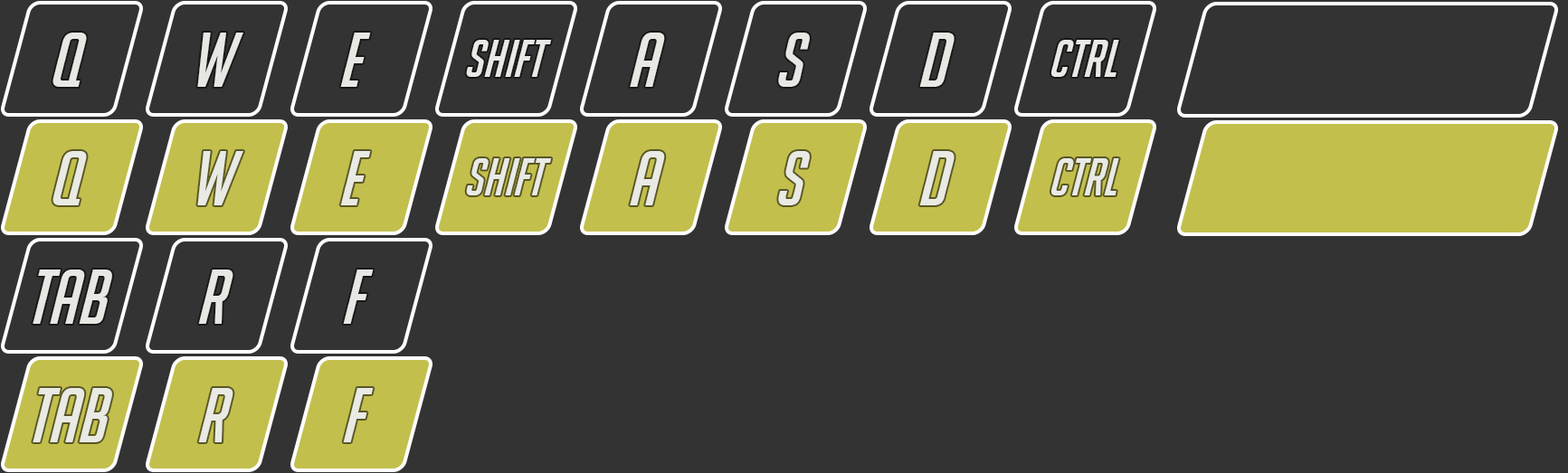
<style>
.page{position:relative;width:1568px;height:473px;background:#333333}
.page>*{position:absolute;margin:0}
.t1{font:74.8px "BigNoodleTooOblique";color:#e9eae5}
.t2{font:51.2px "BigNoodleTooOblique";color:#e9eae5}
</style>
<div class="page">
<p class="t1" style="left:52px;top:33px;width:35px;height:54px">Q</p>
<p class="t1" style="left:197px;top:33px;width:46px;height:54px">W</p>
<p class="t1" style="left:340px;top:33px;width:31px;height:54px">E</p>
<p class="t2" style="left:466px;top:40px;width:86px;height:37px">SHIFT</p>
<p class="t1" style="left:630px;top:33px;width:35px;height:54px">A</p>
<p class="t1" style="left:778px;top:33px;width:32px;height:54px">S</p>
<p class="t1" style="left:919px;top:33px;width:36px;height:54px">D</p>
<p class="t2" style="left:1050px;top:40px;width:69px;height:37px">CTRL</p>
<p class="t1" style="left:52px;top:151px;width:35px;height:54px">Q</p>
<p class="t1" style="left:197px;top:151px;width:46px;height:54px">W</p>
<p class="t1" style="left:340px;top:151px;width:31px;height:54px">E</p>
<p class="t2" style="left:466px;top:158px;width:86px;height:37px">SHIFT</p>
<p class="t1" style="left:630px;top:151px;width:35px;height:54px">A</p>
<p class="t1" style="left:778px;top:151px;width:32px;height:54px">S</p>
<p class="t1" style="left:919px;top:151px;width:36px;height:54px">D</p>
<p class="t2" style="left:1050px;top:158px;width:69px;height:37px">CTRL</p>
<p class="t1" style="left:33px;top:270px;width:79px;height:54px">TaB</p>
<p class="t1" style="left:198px;top:270px;width:35px;height:54px">R</p>
<p class="t1" style="left:343px;top:270px;width:31px;height:54px">F</p>
<p class="t1" style="left:33px;top:388px;width:79px;height:54px">TAB</p>
<p class="t1" style="left:198px;top:388px;width:35px;height:54px">R</p>
<p class="t1" style="left:343px;top:388px;width:31px;height:54px">F</p>
</div>
